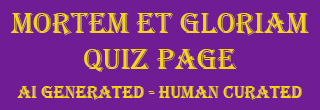
<style>
.page{position:relative;width:320px;height:110px;background:#701c94}
.page>*{position:absolute;margin:0}
.t1{font:30px "Algerian";color:#f6d70a}
.t2{font:18px "Algerian";color:#f6d70a}
</style>
<div class="page">
<p class="t1" style="left:11px;top:13px;width:298px;height:59px;text-align:center">Mortem et gloriam<br>quiz page</p>
<p class="t2" style="left:17px;top:86px;width:285px;height:14px">AI Generated - Human Curated</p>
</div>
